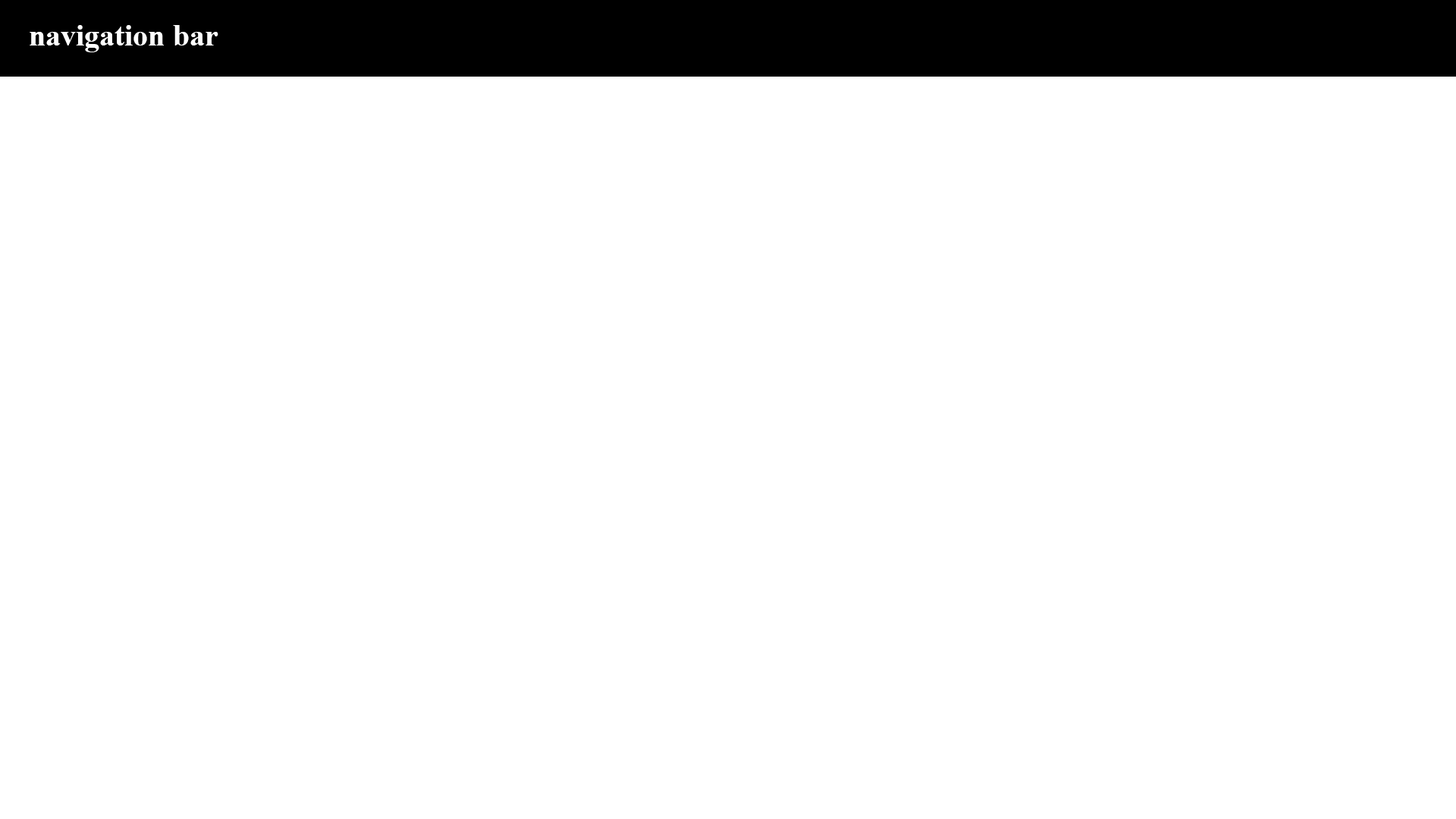
<style>
.page{position:relative;width:1456px;height:819px;background:#ffffff}
.page>*{position:absolute;margin:0}
.t1{font:30.3px "TimesNewRomanPS-BoldMT";color:#ffffff}
</style>
<div class="page">
<p class="t1" style="left:30px;top:25px;width:188px;height:27px">navigation bar</p>
</div>
